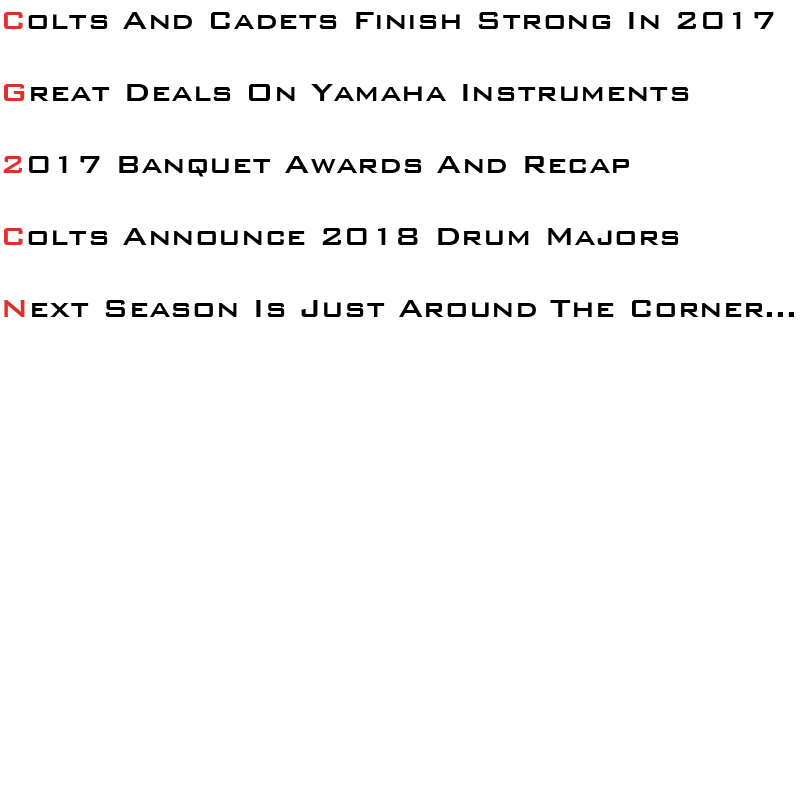
<style>
.page{position:relative;width:800px;height:800px;background:#ffffff}
.page>*{position:absolute;margin:0}
.t1{font:33px/36px "BankGothicBT-Medium";color:#000000}
.t2{font:33px/36px "BankGothicBT-Medium";color:#e1302a}
</style>
<div class="page">
<p class="t1" style="left:3px;top:12px;width:791px;height:305px"><span class="t2">C</span>olts And Cadets Finish Strong In 2017<br><br><span class="t2">G</span>reat Deals On Yamaha Instruments<br><br><span class="t2">2</span>017 Banquet Awards And Recap<br><br><span class="t2">C</span>olts Announce 2018 Drum Majors<br><br><span class="t2">N</span>ext Season Is Just Around The Corner...</p>
</div>
